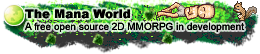
<style>
.page{position:relative;width:260px;height:54px;background:#ffffff}
.page>*{position:absolute;margin:0}
.t1{font:10px "ArialMT";color:#000000}
.t2{font:12px "Arial-Black";color:#000000}
</style>
<div class="page">
<p class="t1" style="left:25px;top:9px;width:219px;height:23px"><span class="t2">The Mana World<br></span>A free open source 2D MMORPG in development</p>
</div>
